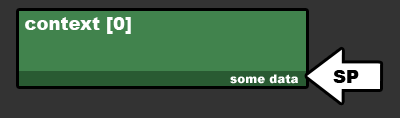
<style>
.page{position:relative;width:400px;height:118px;background:#333333}
.page>*{position:absolute;margin:0}
.t1{font:18px "Arial-Black";color:#ffffff}
.t2{font:12px "Arial-Black";color:#ffffff}
.t3{font:18px "Arial-Black";color:#000000}
</style>
<div class="page">
<p class="t1" style="left:25px;top:17px;width:106px;height:17px">context [0]</p>
<p class="t2" style="left:230px;top:74px;width:68px;height:10px">some data</p>
<p class="t3" style="left:333px;top:70px;width:26px;height:13px">SP</p>
</div>
